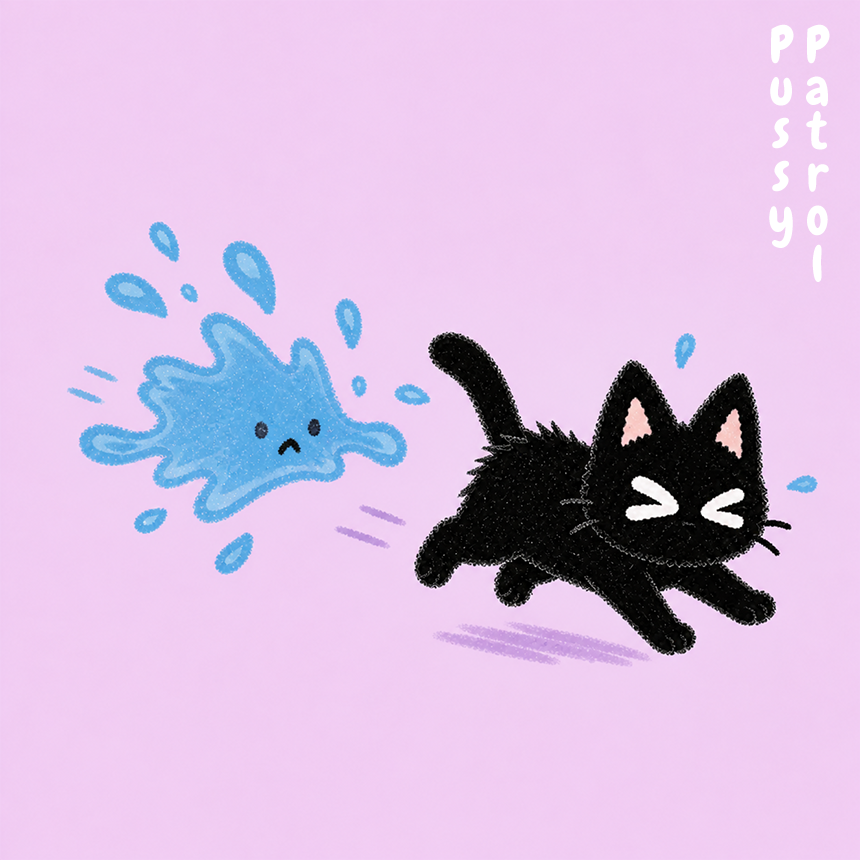
<style>
.page{position:relative;width:860px;height:860px}
.page>*{position:absolute;margin:0}
.t1{font:50px/36px "Chewy-Regular";letter-spacing:-0.14em;color:#ffffff}
.t2{font:50px/36px "Chewy-Regular";letter-spacing:-0.06em;color:#ffffff}
</style>
<div class="page">
<p class="t1" style="left:769px;top:24px;width:61px;height:258px">Patr<span class="t2">ol<br></span>Pussy</p>
</div>
